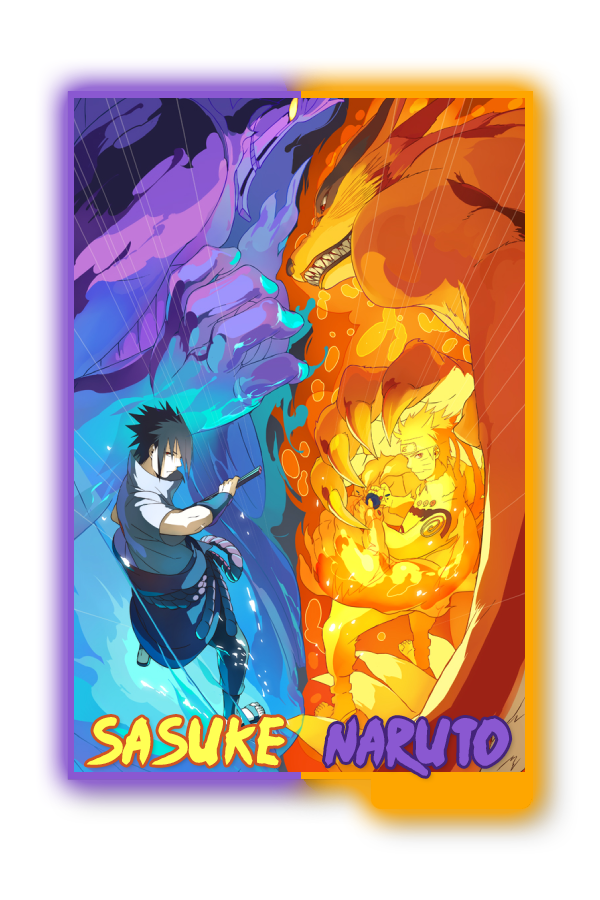
<style>
.page{position:relative;width:600px;height:900px;background:#ffffff}
.page>*{position:absolute;margin:0}
.t1{font:53px "Ninja-Naruto";color:#ffff54}
.t2{font:53px "Ninja-Naruto";color:#8a58d1}
</style>
<div class="page">
<p class="t1" style="left:86px;top:717px;width:199px;height:49px">SASUKE</p>
<p class="t2" style="left:325px;top:717px;width:185px;height:59px">NARUTO</p>
</div>
